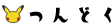
<style>
.page{position:relative;width:112px;height:28px;background:#ffffff}
.page>*{position:absolute;margin:0}
.t1{font:23.9px "komadori-mini";color:#000000}
</style>
<div class="page">
<p class="t1" style="left:29px;top:6px;width:83px;height:17px">つんどく</p>
</div>
